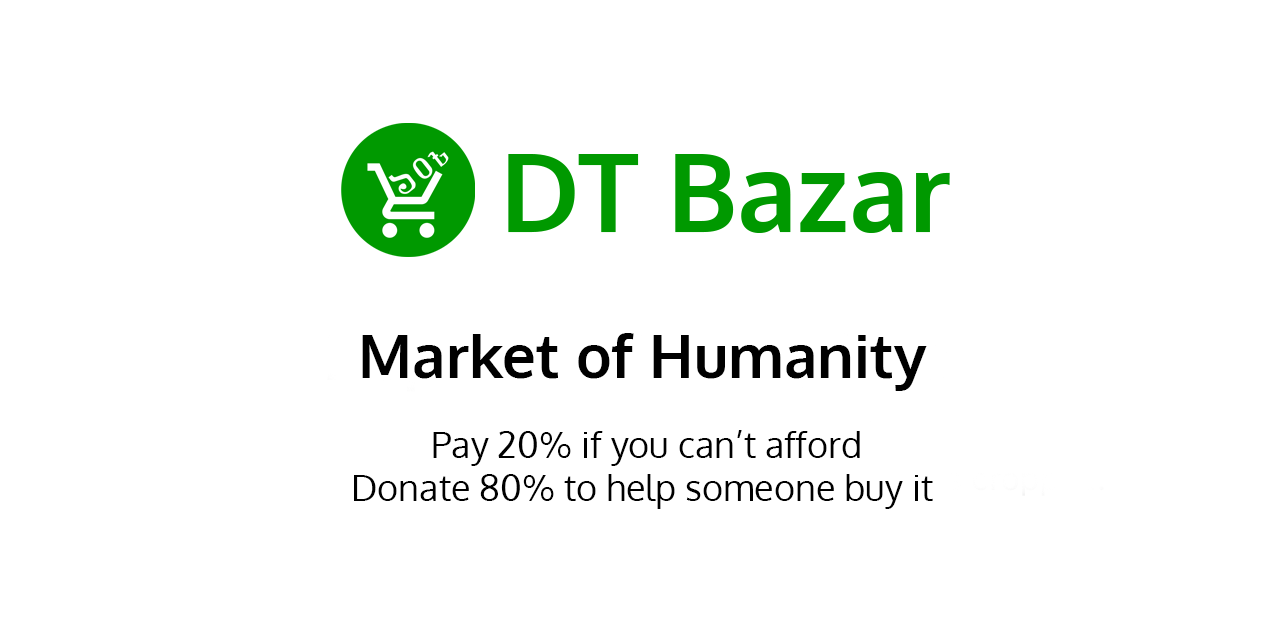
<style>
.page{position:relative;width:1280px;height:640px;background:#ffffff}
.page>*{position:absolute;margin:0}
.t1{font:60px "Oxygen-Bold";color:#000000}
.t2{font:36px "Oxygen-Regular";color:#000000}
</style>
<div class="page">
<p class="t1" style="left:362px;top:333px;width:565px;height:58px">Market of Humanity</p>
<p class="t2" style="left:354px;top:430px;width:579px;height:79px;text-align:center">Pay 20% if you can’t afford<br>Donate 80% to help someone buy it</p>
</div>
